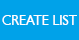
<style>
.page{position:relative;width:79px;height:40px;background:#00a2e9}
.page>*{position:absolute;margin:0}
.t1{font:13.9px "Humanist521BT-Roman";color:#ffffff;scale:0.96 1}
</style>
<div class="page">
<p class="t1" style="left:2px;top:15px;width:75px;height:10px">CREATE LIST</p>
</div>
